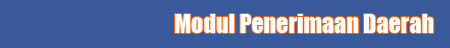
<style>
.page{position:relative;width:450px;height:48px;background:#385a9a}
.page>*{position:absolute;margin:0}
.t1{font:24px "Impact";color:#ffffff}
</style>
<div class="page">
<p class="t1" style="left:175px;top:14px;width:259px;height:19px">Modul Penerimaan Daerah</p>
</div>
